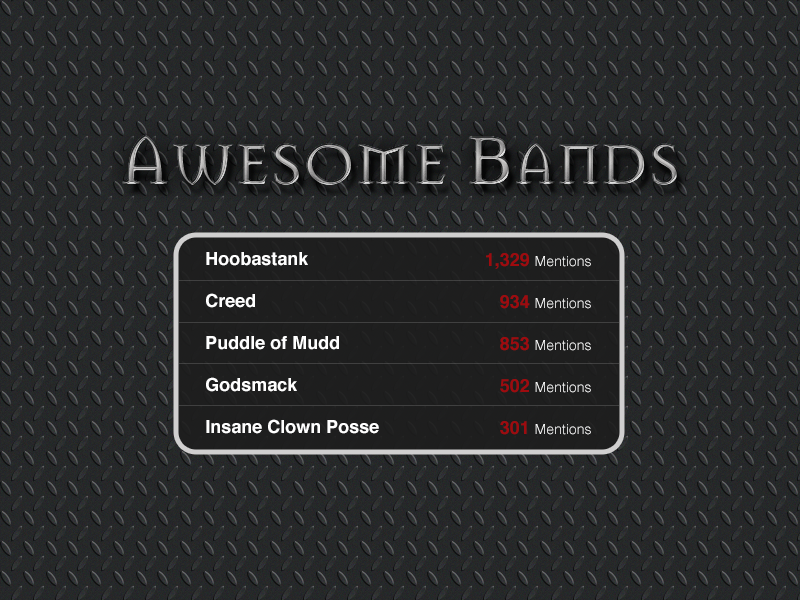
<style>
.page{position:relative;width:800px;height:600px}
.page>*{position:absolute;margin:0}
.t1{font:18px/21px "Helvetica-Bold";color:#ffffff}
.t2{font:14px/21px "Helvetica-Light";color:#ffffff}
.t3{font:18px/21px "Helvetica-Bold";color:#9e0b0f}
</style>
<div class="page">
<p class="t1" style="left:206px;top:252px;width:173px;height:182px">Hoobastank<br><br>Creed<br><br>Puddle of Mudd<br><br>Godsmack<br><br>Insane Clown Posse</p>
<p class="t2" style="left:486px;top:253px;width:105px;height:182px;text-align:right"><span class="t3">1,329 </span>Mentions<br><br><span class="t3">934 </span>Mentions<br><br><span class="t3">853 </span>Mentions<br><br><span class="t3">502 </span>Mentions<br><br><span class="t3">301 </span>Mentions</p>
</div>
